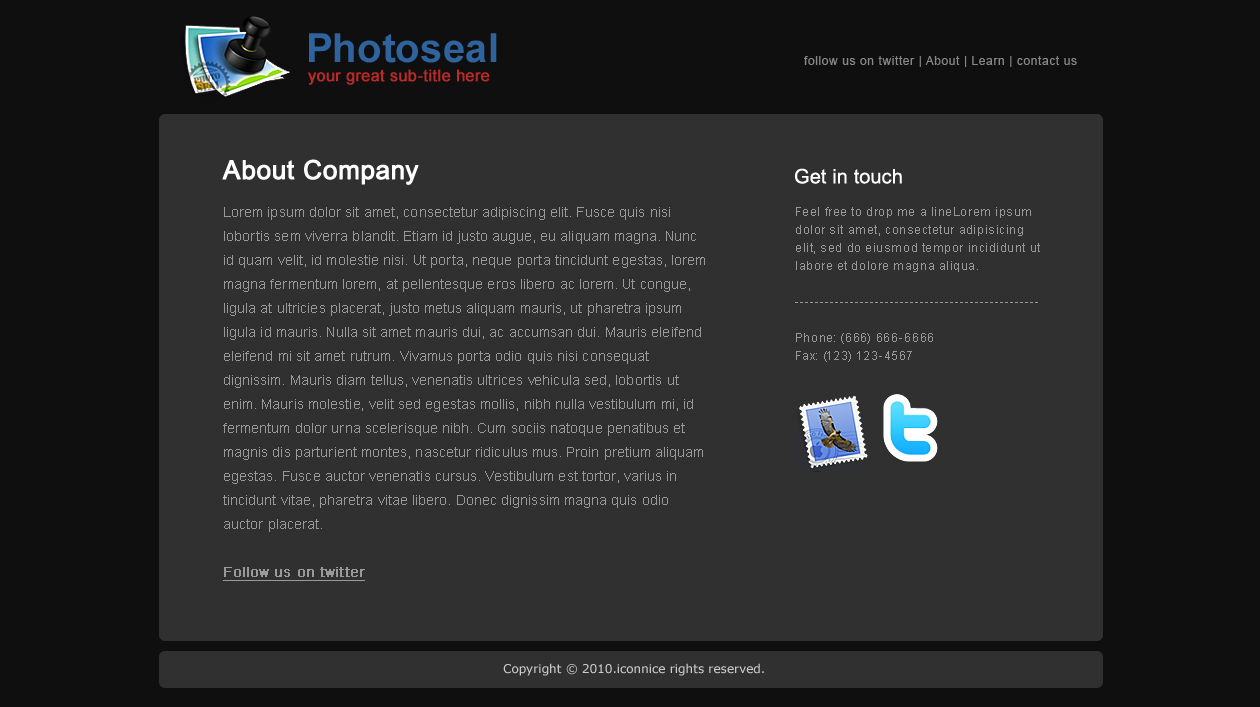
<style>
.page{position:relative;width:1260px;height:707px;background:#303030}
.page>*{position:absolute;margin:0}
.t1{font:40px "Arial-BoldMT";letter-spacing:0.01em;color:#2e639e}
.t2{font:12px "ArialMT";letter-spacing:0.05em;color:#888888}
.t3{font:16px "ArialMT";letter-spacing:0.01em;color:#bc2a27;font-weight:bold}
.t4{font:26px "ArialMT";letter-spacing:0.01em;color:#ffffff;font-weight:bold}
.t5{font:20px "ArialMT";letter-spacing:0.01em;color:#ffffff}
.t6{font:14px/24px "ArialMT";letter-spacing:0.01em;color:#999999}
.t7{font:14px/24px "ArialMT";letter-spacing:0.01em;color:#999999;font-weight:bold;text-decoration:underline}
.t8{font:12px/18px "ArialMT";letter-spacing:0.05em;color:#999999}
.t9{font:12px "Verdana";color:#cbcbcb}
</style>
<div class="page">
<p class="t1" style="left:309px;top:33px;width:188px;height:30px">Photoseal</p>
<p class="t2" style="left:804px;top:56px;width:273px;height:11px">follow us on twitter | About | Learn | contact us</p>
<p class="t3" style="left:308px;top:69px;width:182px;height:16px">your great sub-title here</p>
<p class="t4" style="left:222px;top:159px;width:197px;height:26px">About Company</p>
<p class="t5" style="left:795px;top:168px;width:107px;height:16px">Get in touch</p>
<p class="t6" style="left:223px;top:207px;width:482px;height:374px">Lorem ipsum dolor sit amet, consectetur adipiscing elit. Fusce quis nisi lobortis sem viverra blandit. Etiam id justo augue, eu aliquam magna. Nunc id quam velit, id molestie nisi. Ut porta, neque porta tincidunt egestas, lorem magna fermentum lorem, at pellentesque eros libero ac lorem. Ut congue, ligula at ultricies placerat, justo metus aliquam mauris, ut pharetra ipsum ligula id mauris. Nulla sit amet mauris dui, ac accumsan dui. Mauris eleifend eleifend mi sit amet rutrum. Vivamus porta odio quis nisi consequat dignissim. Mauris diam tellus, venenatis ultrices vehicula sed, lobortis ut enim. Mauris molestie, velit sed egestas mollis, nibh nulla vestibulum mi, id fermentum dolor urna scelerisque nibh. Cum sociis natoque penatibus et magnis dis parturient montes, nascetur ridiculus mus. Proin pretium aliquam egestas. Fusce auctor venenatis cursus. Vestibulum est tortor, varius in tincidunt vitae, pharetra vitae libero. Donec dignissim magna quis odio auctor placerat.  <br><br><span class="t7">Follow us on twitter</span></p>
<p class="t8" style="left:795px;top:207px;width:245px;height:155px">Feel free to drop me a lineLorem ipsum dolor sit amet, consectetur adipisicing elit, sed do eiusmod tempor incididunt ut labore et dolore magna aliqua. <br><br>-------------------------------------------------<br><br>Phone: (666) 666-6666<br>Fax: (123) 123-4567</p>
<p class="t9" style="left:503px;top:663px;width:261px;height:13px">Copyright © 2010.iconnice rights reserved.</p>
</div>
